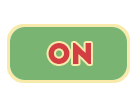
<style>
.page{position:relative;width:140px;height:107px;background:#ffffff}
.page>*{position:absolute;margin:0}
.t1{font:28px "BigJohn";color:#d33e43}
</style>
<div class="page">
<p class="t1" style="left:48px;top:43px;width:43px;height:21px">on</p>
</div>
